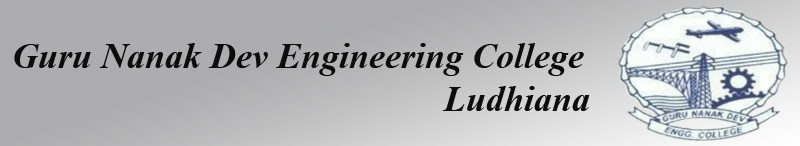
<style>
.page{position:relative;width:800px;height:146px}
.page>*{position:absolute;margin:0}
.t1{font:36px "TimesNewRomanPS-BoldItalicMT";color:#0c0c0c}
</style>
<div class="page">
<p class="t1" style="left:14px;top:43px;width:576px;height:68px">Guru Nanak Dev Engineering College <br>               Ludhiana</p>
</div>
